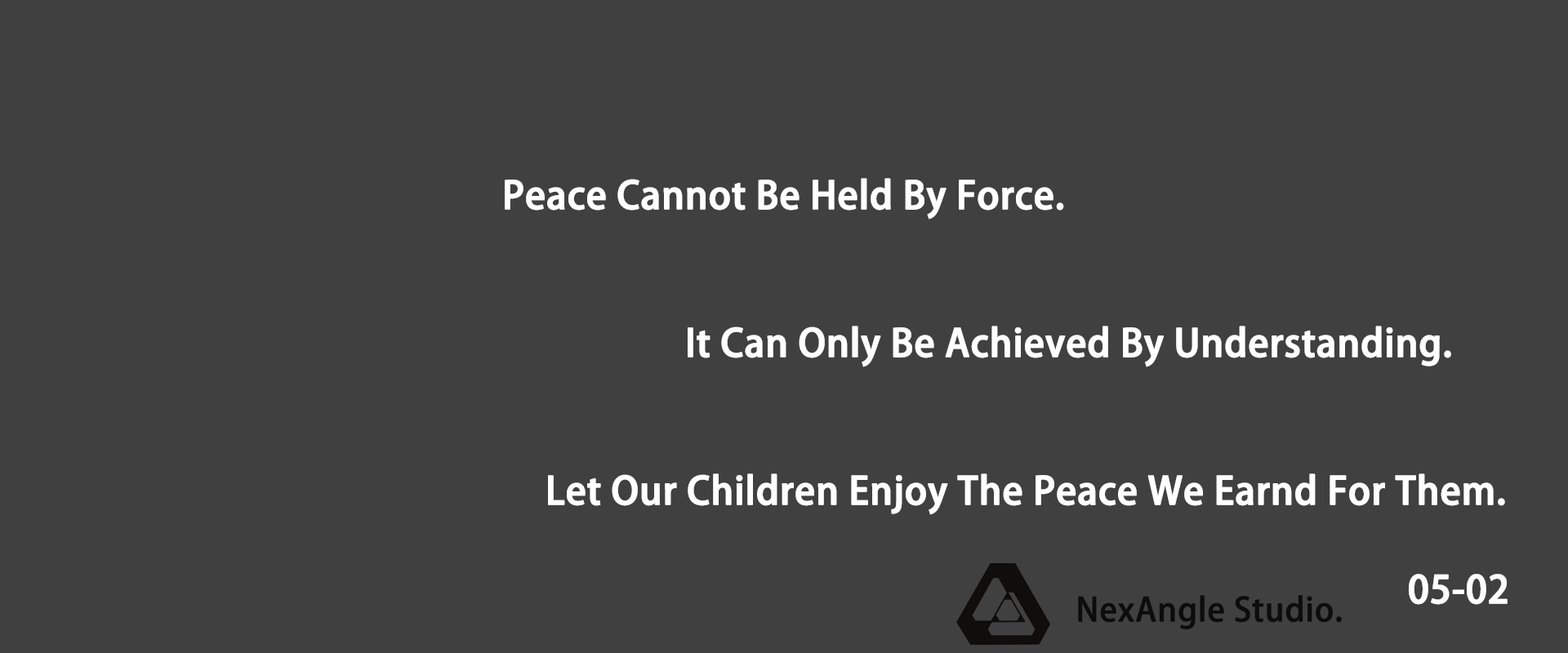
<style>
.page{position:relative;width:1568px;height:653px;background:#404040}
.page>*{position:absolute;margin:0}
.t1{font:37.4px "AdobeHeitiStd-Regular";color:#ffffff;font-weight:bold}
</style>
<div class="page">
<p class="t1" style="left:505px;top:178px;width:559px;height:42px">Peace Cannot Be Held By Force.</p>
<p class="t1" style="left:688px;top:326px;width:763px;height:42px">It Can Only Be Achieved By Understanding.</p>
<p class="t1" style="left:548px;top:474px;width:957px;height:41px">Let Our Children Enjoy The Peace We Earnd For Them.</p>
<p class="t1" style="left:1409px;top:574px;width:99px;height:31px">05-02</p>
</div>
